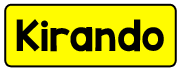
<style>
.page{position:relative;width:181px;height:72px;background:#fffc00}
.page>*{position:absolute;margin:0}
.t1{font:36px "KGBlankSpaceSolid";color:#000000}
</style>
<div class="page">
<p class="t1" style="left:16px;top:19px;width:148px;height:33px">Kirando</p>
</div>
